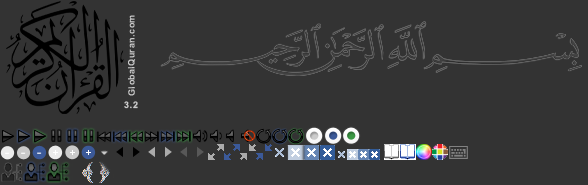
<style>
.page{position:relative;width:588px;height:185px;background:#333333}
.page>*{position:absolute;margin:0}
.t1{font:9px "Arial-BoldMT";letter-spacing:0.05em;color:#cccccc}
.t2{font:10px "Tahoma-Bold";letter-spacing:0.05em;color:#ffffff}
</style>
<div class="page">
<p class="t1" style="left:128px;top:15px;width:8px;height:81px;rotate:-90deg">GlobalQuran.com</p>
<p class="t1" style="left:124px;top:101px;width:14px;height:8px">3.2</p>
<p class="t2" style="left:53px;top:150px;width:5px;height:5px">+</p>
<p class="t2" style="left:70px;top:150px;width:5px;height:5px">+</p>
<p class="t2" style="left:86px;top:150px;width:5px;height:5px">+</p>
</div>
